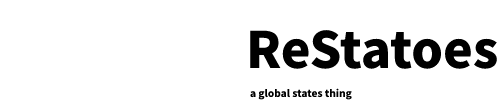
<style>
.page{position:relative;width:500px;height:100px;background:#ffffff}
.page>*{position:absolute;margin:0}
.t1{font:50px "NotoSansTC-Black";color:#000000}
.t2{font:10px "NotoSansTC-Black";color:#000000}
</style>
<div class="page">
<p class="t1" style="left:250px;top:30px;width:247px;height:39px">ReStatoes</p>
<p class="t2" style="left:250px;top:88px;width:102px;height:12px">a global states thing</p>
</div>
